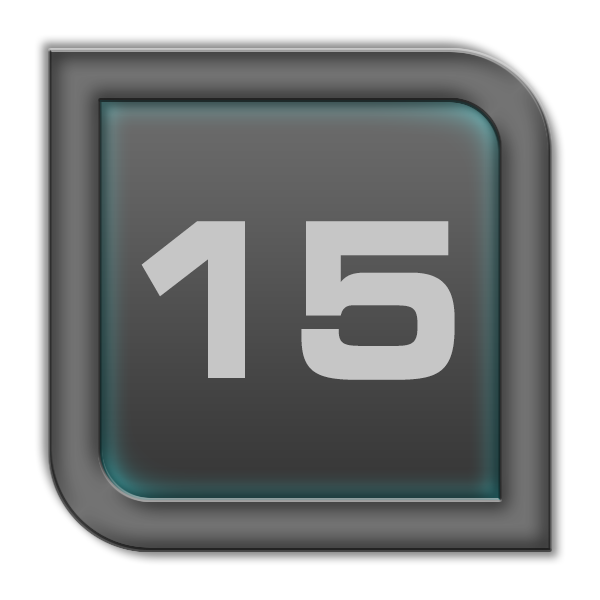
<style>
.page{position:relative;width:600px;height:600px;background:#ffffff}
.page>*{position:absolute;margin:0}
.t1{font:216px "EurostileLTStd-BoldEx2";color:#c6c6c6;scale:0.83 1}
</style>
<div class="page">
<p class="t1" style="left:141px;top:221px;width:314px;height:159px">15</p>
</div>
